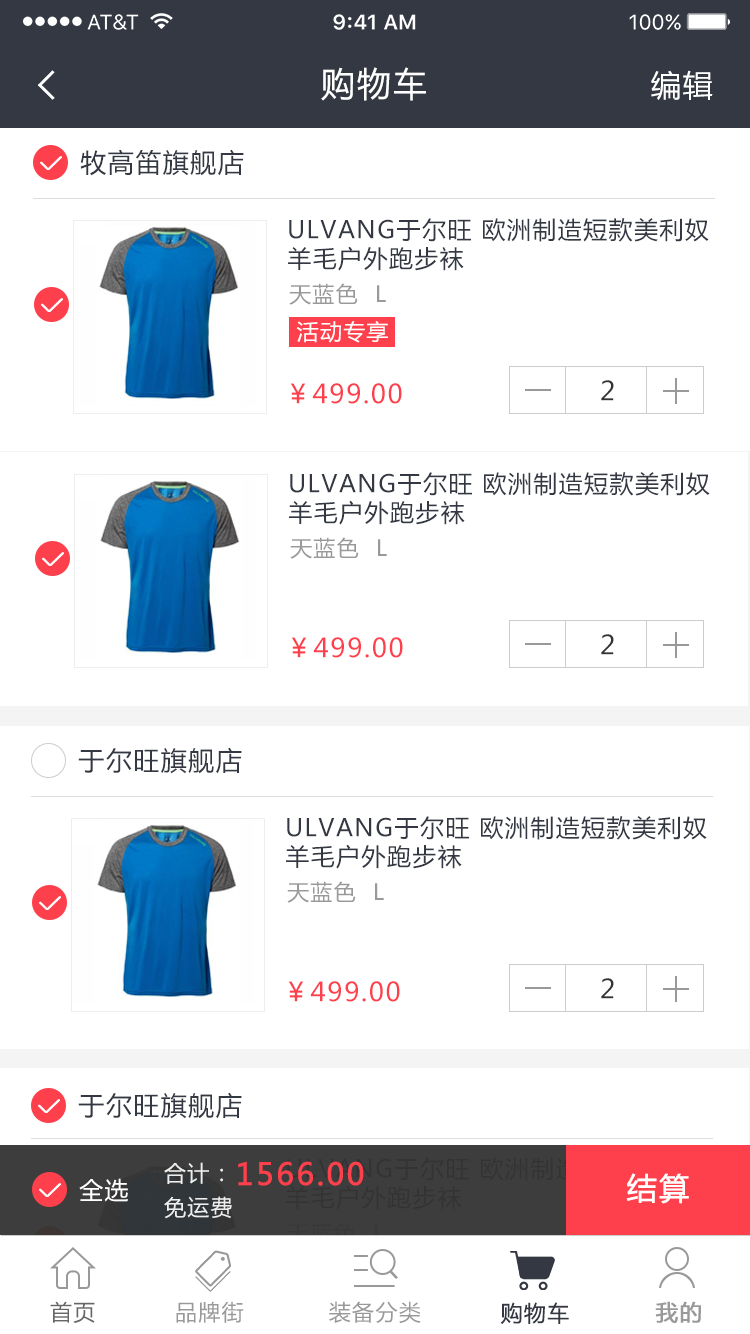
<style>
.page{position:relative;width:750px;height:1334px;background:#ffffff}
.page>*{position:absolute;margin:0}
.t1{font:34px "MicrosoftYaHei";letter-spacing:0.06em;color:#ffffff}
.t2{font:30px "MicrosoftYaHei";letter-spacing:0.06em;color:#ffffff}
.t3{font:26px "MicrosoftYaHei";letter-spacing:0.06em;color:#343843}
.t4{font:24px "MicrosoftYaHei";letter-spacing:0.06em;color:#343843}
.t5{font:22px "MicrosoftYaHei";letter-spacing:0.06em;color:#999999}
.t6{font:22px "MicrosoftYaHei";letter-spacing:0.06em;color:#ffffff}
.t7{font:26px "MicrosoftYaHei";letter-spacing:0.06em;color:#fe404c}
.t8{font:26px "MicrosoftYaHei";letter-spacing:0.06em;color:#333333}
.t9{font:22px "MicrosoftYaHei";letter-spacing:0.06em;color:#eeeeee}
.t10{font:30px "MicrosoftYaHei";letter-spacing:0.06em;color:#fe404c;font-weight:bold}
.t11{font:24px "MicrosoftYaHei";letter-spacing:0.06em;color:#ffffff}
.t12{font:30px "MicrosoftYaHei";letter-spacing:0.06em;color:#ffffff;font-weight:bold}
.t13{font:22px "MicrosoftYaHei";letter-spacing:0.06em;color:#666666}
.t14{font:22px "MicrosoftYaHei";letter-spacing:0.06em;color:#343843}
.t15{font:22px "MicrosoftYaHei";letter-spacing:0.06em;color:#999999;font-weight:bold}
</style>
<div class="page">
<p class="t1" style="left:321px;top:67px;width:105px;height:34px">购物车</p>
<p class="t2" style="left:651px;top:70px;width:62px;height:30px">编辑</p>
<p class="t3" style="left:80px;top:149px;width:164px;height:27px">牧高笛旗舰店</p>
<p class="t4" style="left:288px;top:218px;width:421px;height:53px">ULVANG于尔旺 欧洲制造短款美利奴羊毛户外跑步袜</p>
<p class="t5" style="left:289px;top:283px;width:97px;height:22px">天蓝色  L</p>
<p class="t6" style="left:296px;top:321px;width:92px;height:22px">活动专享</p>
<p class="t7" style="left:290px;top:383px;width:112px;height:21px">￥499.00</p>
<p class="t8" style="left:601px;top:380px;width:13px;height:21px">2</p>
<p class="t4" style="left:289px;top:472px;width:421px;height:53px">ULVANG于尔旺 欧洲制造短款美利奴羊毛户外跑步袜</p>
<p class="t5" style="left:290px;top:537px;width:97px;height:22px">天蓝色  L</p>
<p class="t7" style="left:291px;top:637px;width:112px;height:21px">￥499.00</p>
<p class="t8" style="left:601px;top:634px;width:13px;height:21px">2</p>
<p class="t3" style="left:78px;top:747px;width:164px;height:27px">于尔旺旗舰店</p>
<p class="t4" style="left:286px;top:816px;width:421px;height:53px">ULVANG于尔旺 欧洲制造短款美利奴羊毛户外跑步袜</p>
<p class="t5" style="left:287px;top:881px;width:97px;height:22px">天蓝色  L</p>
<p class="t7" style="left:288px;top:981px;width:112px;height:21px">￥499.00</p>
<p class="t8" style="left:601px;top:978px;width:13px;height:21px">2</p>
<p class="t3" style="left:78px;top:1092px;width:164px;height:27px">于尔旺旗舰店</p>
<p class="t9" style="left:164px;top:1162px;width:59px;height:22px">合计：</p>
<p class="t10" style="left:238px;top:1161px;width:126px;height:25px">1566.00</p>
<p class="t11" style="left:79px;top:1178px;width:49px;height:24px">全选</p>
<p class="t12" style="left:626px;top:1173px;width:63px;height:31px">结算</p>
<p class="t9" style="left:164px;top:1196px;width:68px;height:23px">免运费</p>
<p class="t13" style="left:50px;top:1301px;width:45px;height:22px">首页</p>
<p class="t5" style="left:176px;top:1301px;width:68px;height:22px">品牌街</p>
<p class="t5" style="left:329px;top:1301px;width:92px;height:22px">装备分类</p>
<p class="t14" style="left:500px;top:1302px;width:69px;height:22px">购物车</p>
<p class="t15" style="left:655px;top:1301px;width:46px;height:22px">我的</p>
</div>
